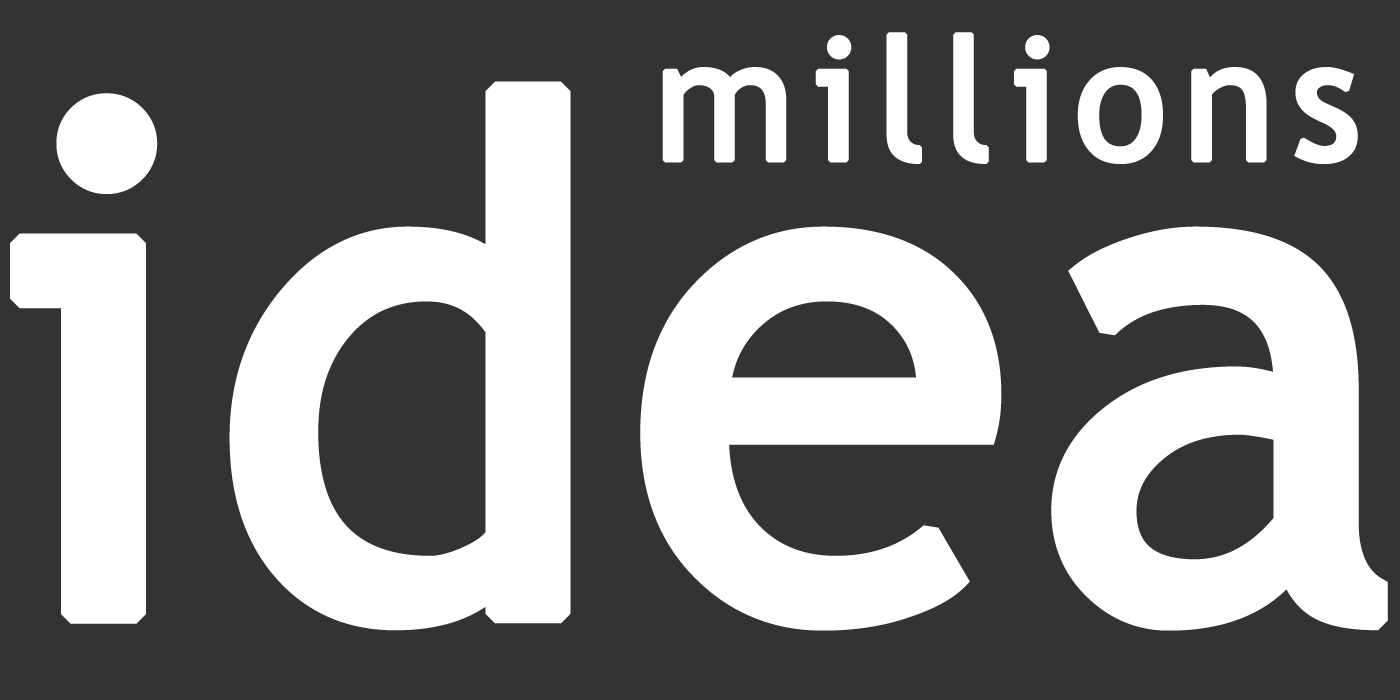
<style>
.page{position:relative;width:1400px;height:700px;background:#333333}
.page>*{position:absolute;margin:0}
.t1{font:170px "TrebuchetMS";letter-spacing:0.07em;color:#ffffff;font-weight:bold}
.t2{font:709px "TrebuchetMS";color:#ffffff;font-weight:bold}
</style>
<div class="page">
<p class="t1" style="left:662px;top:32px;width:696px;height:132px">millions</p>
<p class="t2" style="left:10px;top:81px;width:1378px;height:550px">idea</p>
</div>
